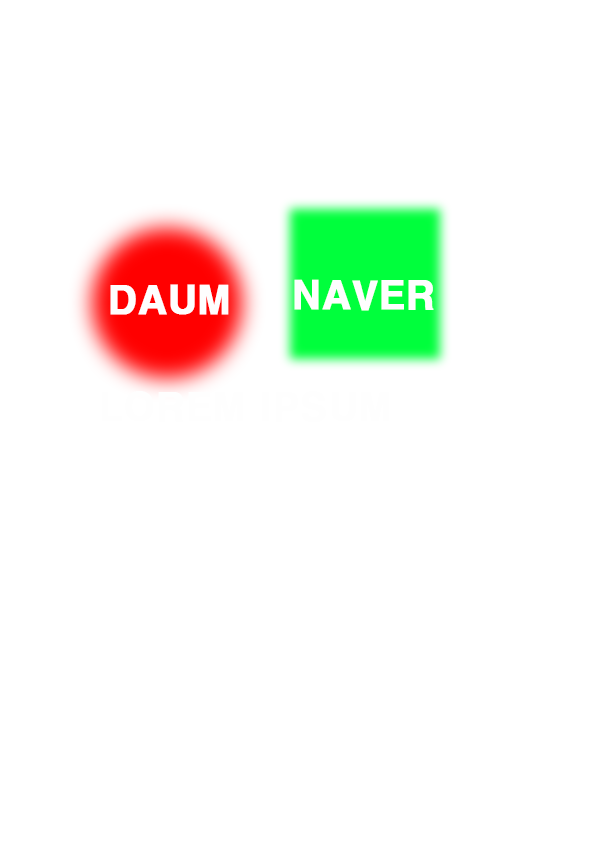
<style>
.page{position:relative;width:595px;height:842px;background:#ffffff}
.page>*{position:absolute;margin:0}
.t1{font:38px "H2gtrE";letter-spacing:-0.025em;color:#fefefe;text-transform:uppercase;font-weight:bold}
</style>
<div class="page">
<p class="t1" style="left:294px;top:279px;width:140px;height:32px">naver</p>
<p class="t1" style="left:110px;top:284px;width:119px;height:31px">daum</p>
</div>
